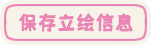
<style>
.page{position:relative;width:151px;height:45px;background:#f7f3e9}
.page>*{position:absolute;margin:0}
.t1{font:12px "shetumodengxiaofangti";color:#eb84b4;font-weight:bold;scale:0.94 1}
</style>
<div class="page">
<p class="t1" style="left:19px;top:13px;width:114px;height:19px">保存立绘信息</p>
</div>
